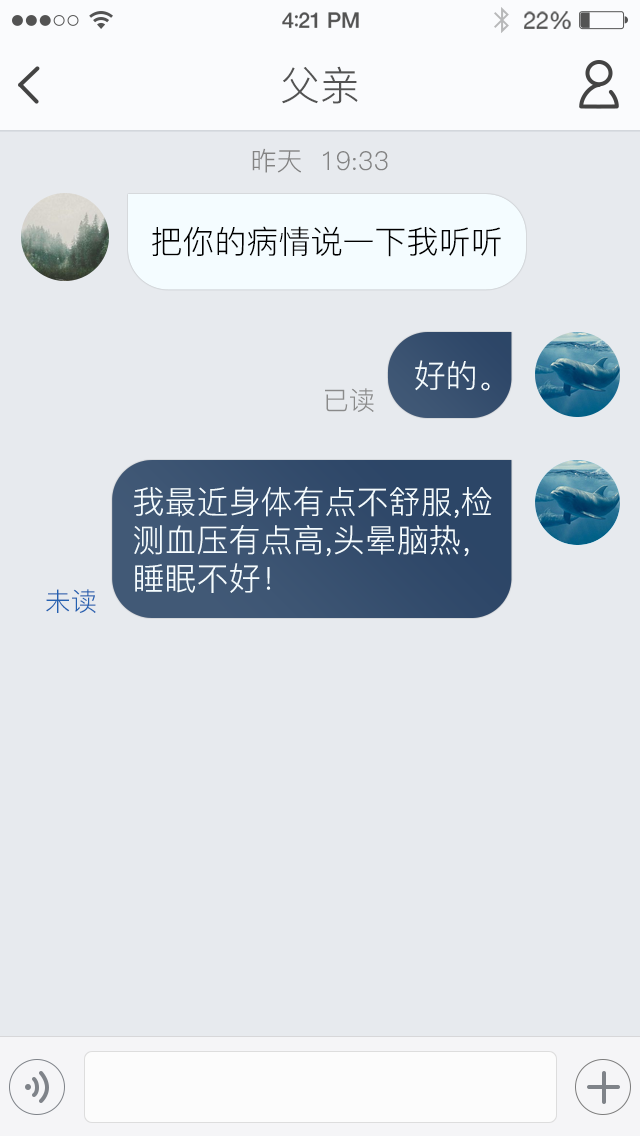
<style>
.page{position:relative;width:640px;height:1136px;background:#e7eaee}
.page>*{position:absolute;margin:0}
.t1{font:40px "PingFang-SC-Regular";color:#535353}
.t2{font:26px "PingFang-SC-Regular";color:#838383}
.t3{font:32px "PingFang-SC-Regular";color:#000000}
.t4{font:32px "PingFang-SC-Regular";color:#f4fcff}
.t5{font:26px "PingFang-SC-Regular";color:#8a8a8a}
.t6{font:26px "PingFang-SC-Regular";color:#2561b2}
</style>
<div class="page">
<p class="t1" style="left:282px;top:66px;width:76px;height:38px">父亲</p>
<p class="t2" style="left:252px;top:148px;width:136px;height:25px">昨天  19:33</p>
<p class="t3" style="left:152px;top:226px;width:349px;height:31px">把你的病情说一下我听听</p>
<p class="t4" style="left:415px;top:360px;width:75px;height:31px">好的。</p>
<p class="t5" style="left:325px;top:388px;width:49px;height:24px">已读</p>
<p class="t4" style="left:134px;top:486px;width:358px;height:107px">我最近身体有点不舒服,检<br>测血压有点高,头晕脑热，<br>睡眠不好！</p>
<p class="t6" style="left:46px;top:589px;width:50px;height:24px">未读</p>
</div>
